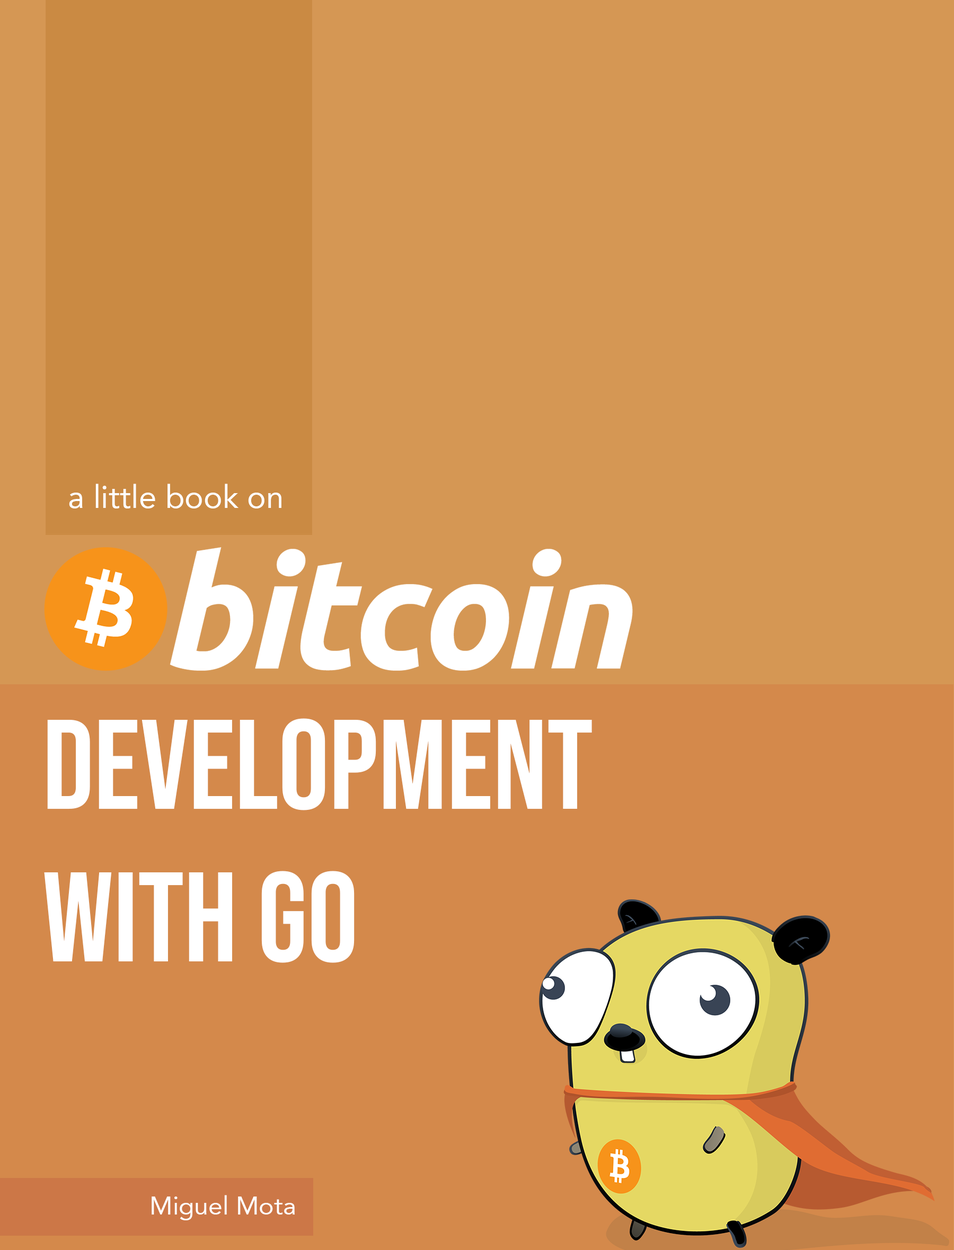
<style>
.page{position:relative;width:954px;height:1250px;background:#d59754}
.page>*{position:absolute;margin:0}
.t1{font:31.8px "Avenir-Roman";color:#ffffff}
.t2{font:127.2px "BebasNeue-Regular";color:#ffffff}
.t3{font:25.4px "Avenir-Roman";color:#ffffff}
</style>
<div class="page">
<p class="t1" style="left:69px;top:484px;width:212px;height:25px">a little book on</p>
<p class="t2" style="left:44px;top:718px;width:548px;height:245px">Development<br>with Go</p>
<p class="t3" style="left:152px;top:1195px;width:143px;height:26px">Miguel Mota</p>
</div>
